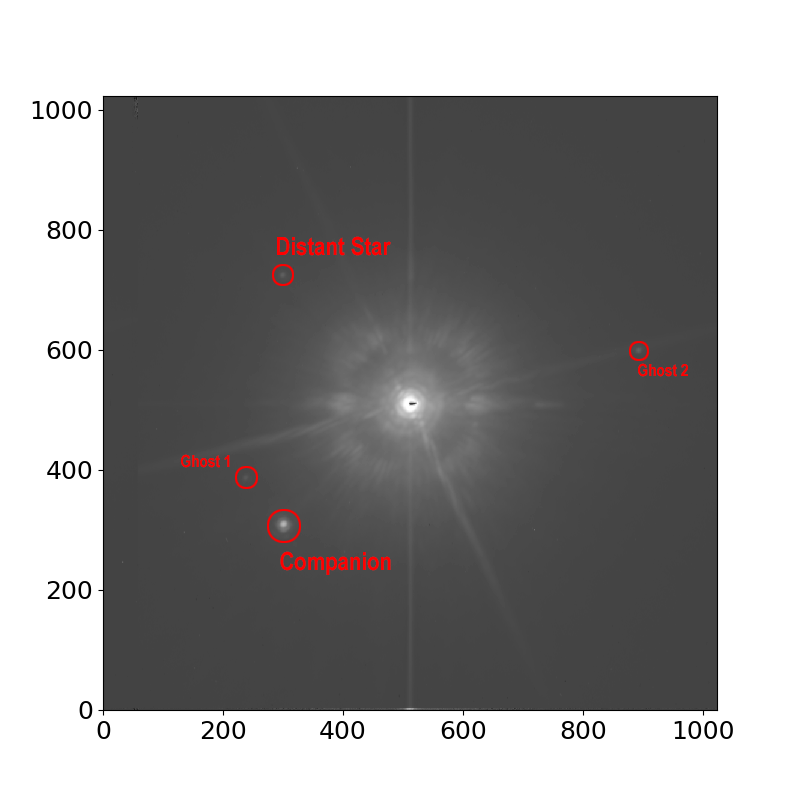
<style>
.page{position:relative;width:800px;height:798px;background:#ffffff}
.page>*{position:absolute;margin:0}
.t1{font:25px "ArialNarrow-Bold";color:#ff0000}
.t2{font:16.7px "ArialNarrow-Bold";color:#ff0000}
</style>
<div class="page">
<p class="t1" style="left:277px;top:236px;width:114px;height:20px">Distant Star</p>
<p class="t2" style="left:638px;top:363px;width:50px;height:14px">Ghost 2</p>
<p class="t2" style="left:181px;top:454px;width:49px;height:14px">Ghost 1</p>
<p class="t1" style="left:280px;top:551px;width:111px;height:24px">Companion</p>
</div>
